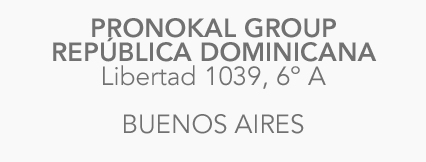
<style>
.page{position:relative;width:426px;height:162px;background:#f9f9f9}
.page>*{position:absolute;margin:0}
.t1{font:26px/24px "AvenirLTPro-Heavy";color:#717171}
.t2{font:26px/24px "AvenirLTPro-Book";color:#717171}
</style>
<div class="page">
<p class="t1" style="left:53px;top:18px;width:324px;height:44px;text-align:center">PRONOKAL GROUP <br>REPÚBLICA DOMINICANA</p>
<p class="t2" style="left:103px;top:65px;width:223px;height:69px;text-align:center">Libertad 1039, 6º A<br><br>BUENOS AIRES</p>
</div>
